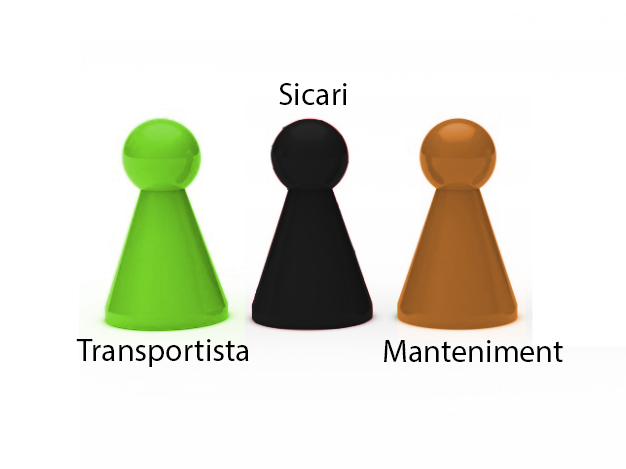
<style>
.page{position:relative;width:626px;height:469px;background:#ffffff}
.page>*{position:absolute;margin:0}
.t1{font:32px "MyriadPro-Regular";color:#000000}
</style>
<div class="page">
<p class="t1" style="left:279px;top:83px;width:68px;height:22px">Sicari</p>
<p class="t1" style="left:76px;top:339px;width:173px;height:28px">Transportista</p>
<p class="t1" style="left:384px;top:340px;width:179px;height:22px">Manteniment</p>
</div>
